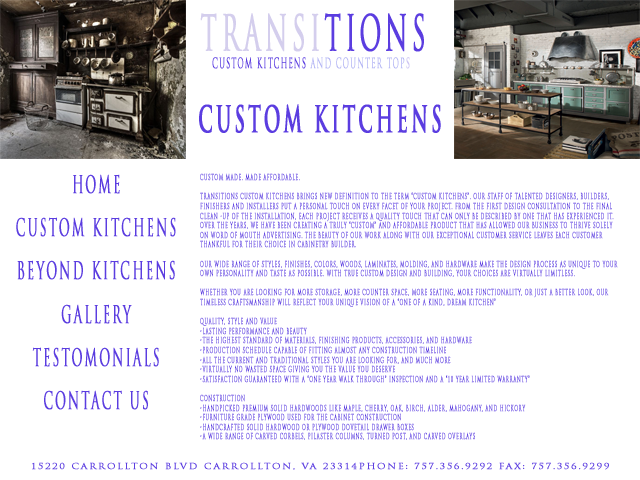
<style>
.page{position:relative;width:640px;height:480px;background:#ffffff}
.page>*{position:absolute;margin:0}
.t1{font:48px "TrajanPro-Regular";letter-spacing:0.15em;color:#d4ceed;text-transform:uppercase;font-weight:bold;scale:0.5 1}
.t2{font:48px "TrajanPro-Regular";letter-spacing:0.15em;color:#5b3de0;text-transform:uppercase;font-weight:bold;scale:0.5 1}
.t3{font:14px "TrajanPro-Regular";letter-spacing:0.15em;color:#5b3de0;text-transform:uppercase;font-weight:bold;scale:0.5 1}
.t4{font:14px "TrajanPro-Regular";letter-spacing:0.15em;color:#b2b4f4;text-transform:uppercase;font-weight:bold;scale:0.5 1}
.t5{font:14px "TrajanPro-Regular";letter-spacing:0.15em;color:#ccc3f2;text-transform:uppercase;font-weight:bold;scale:0.5 1}
.t6{font:36px "TrajanPro-Bold";letter-spacing:0.15em;color:#5b3de0;text-transform:uppercase;font-weight:bold;scale:0.5 1}
.t7{font:24px "TrajanPro-Regular";letter-spacing:0.15em;color:#5b3de0;text-transform:uppercase;font-weight:bold;scale:0.5 1}
.t8{font:8px "TrajanPro-Regular";letter-spacing:0.15em;color:#5b3de0;text-transform:uppercase;font-weight:bold;scale:0.5 1}
.t9{font:8px "TrajanPro-Regular";letter-spacing:0.15em;color:#5b3de0;text-transform:uppercase;font-weight:bold;scale:1.19 1}
</style>
<div class="page">
<p class="t1" style="left:200px;top:13px;width:224px;height:39px">Transi<span class="t2">tions</span></p>
<p class="t3" style="left:212px;top:57px;width:198px;height:12px">Custom Kitchens <span class="t4">and Counter Top</span><span class="t5">s</span></p>
<p class="t6" style="left:199px;top:104px;width:242px;height:29px">Custom Kitchens</p>
<p class="t7" style="left:16px;top:174px;width:160px;height:236px;text-align:center">HOme<br><br>Custom Kitchens<br><br>Beyond Kitchens<br><br>Gallery<br><br>Testomonials<br><br>Contact Us</p>
<p class="t8" style="left:200px;top:173px;width:418px;height:267px">Custom Made. Made Affordable.<br><br>Transitions Custom Kitchens brings new definition to the term “custom kitchens”. Our staff of talented designers, builders, finishers and installers put a personal touch on every facet of your project. From the first design consultation to the final clean -up of the installation, each project receives a quality touch that can only be described by one that has experienced it. Over the years, we have been creating a truly “custom” and affordable product that has allowed our business to thrive solely on word of mouth advertising. The beauty of our work along with our exceptional customer service leaves each customer thankful for their choice in cabinetry builder.<br><br>Our wide range of styles, finishes, colors, woods, laminates, molding, and hardware make the design process as unique to your own personality and taste as possible. With true custom design and building, your choices are virtually limitless.<br><br>Whether you are looking for more storage, more counter space, more seating, more functionality, or just a better look, our timeless craftsmanship will reflect your unique vision of a “one of a kind, dream kitchen”<br><br>Quality, Style and Value<br>•Lasting Performance and Beauty<br>•The highest standard of materials, finishing products, accessories, and hardware<br>•Production schedule capable of fitting almost any construction timeline<br>•All the current and traditional styles you are looking for, and much more<br>•Virtually no wasted space giving you the value you deserve<br>•Satisfaction guaranteed with a “One Year Walk Through” inspection and a “10 Year Limited Warranty”<br><br>Construction<br>•Handpicked premium solid hardwoods like Maple, Cherry, Oak, Birch, Alder, Mahogany, and Hickory<br>•Furniture grade plywood used for the cabinet construction<br>•Handcrafted solid hardwood or plywood dovetail drawer boxes<br>•A wide range of carved corbels, pilaster columns, turned post, and carved overlays<br>•Fully concealed adjustable hinges that allow for precise door alignment<br>•Adjustable shelving options for any cabinet<br>•Soft closing, full extension drawer slide options for “no slam” drawers<br>•An unlimited list of interior cabinet accessories<br><br>Finishes<br>•Sixteen customary stain and paint color options<br>•Custom matching to any stain or paint color desired<br>•Hand rubbed stains with glazes and texturing options<br>•Deep penetrating spray stains for rich depth in the finished color<br>•Get creative by color swapping or mix matching to add to your personal taste<br>•Dozens of weathered, distressed, glazed, and textured finishes<br>•Superior cabinet finishes with several sealer and top coat sheens to choose from<br>•Hand sprayed and control dried for a truly durable and lasting finish</p>
<p class="t9" style="left:32px;top:462px;width:577px;height:8px">15220 Carrollton Blvd Carrollton, VA 23314Phone: 757.356.9292 Fax: 757.356.9299</p>
</div>
